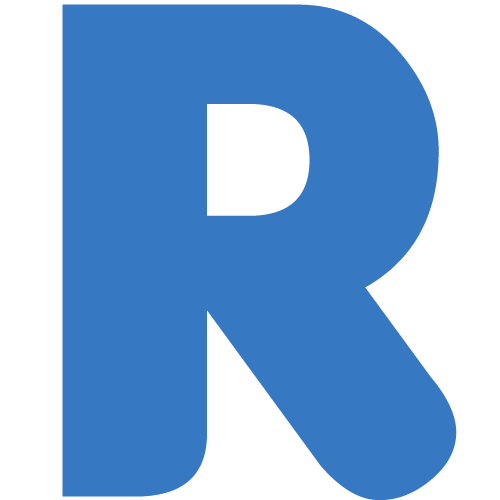
<style>
.page{position:relative;width:500px;height:500px;background:#3778c2}
.page>*{position:absolute;margin:0}
.t1{font:746px "Insaniburger-with-Cheese";color:#3778c2}
</style>
<div class="page">
<p class="t1" style="left:62px;top:4px;width:395px;height:496px">R</p>
</div>
